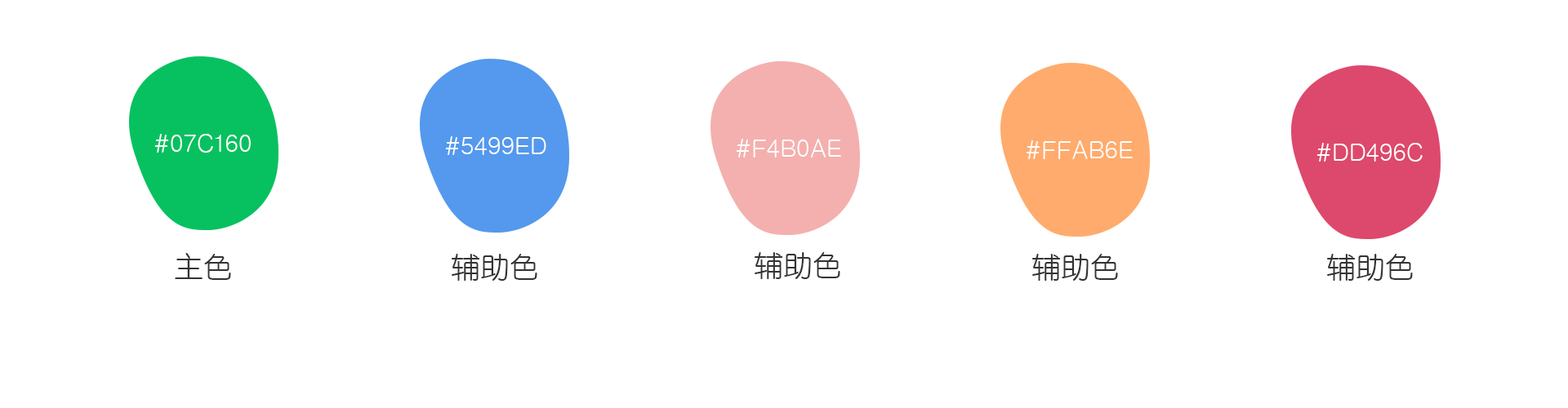
<style>
.page{position:relative;width:1568px;height:408px;background:#ffffff}
.page>*{position:absolute;margin:0}
.t1{font:24.5px "Tensentype-JiaLiXiYuanJ";color:#ffffff}
.t2{font:29.4px "Tensentype-JiaLiXiYuanJ";color:#333333}
</style>
<div class="page">
<p class="t1" style="left:154px;top:134px;width:97px;height:19px">#07C160</p>
<p class="t1" style="left:445px;top:136px;width:101px;height:19px">#5499ED</p>
<p class="t1" style="left:736px;top:139px;width:105px;height:19px">#F4B0AE</p>
<p class="t1" style="left:1026px;top:140px;width:107px;height:19px">#FFAB6E</p>
<p class="t1" style="left:1316px;top:143px;width:107px;height:19px">#DD496C</p>
<p class="t2" style="left:175px;top:253px;width:56px;height:27px">主色</p>
<p class="t2" style="left:452px;top:254px;width:85px;height:27px">辅助色</p>
<p class="t2" style="left:755px;top:252px;width:85px;height:27px">辅助色</p>
<p class="t2" style="left:1032px;top:254px;width:86px;height:27px">辅助色</p>
<p class="t2" style="left:1327px;top:254px;width:86px;height:27px">辅助色</p>
</div>
